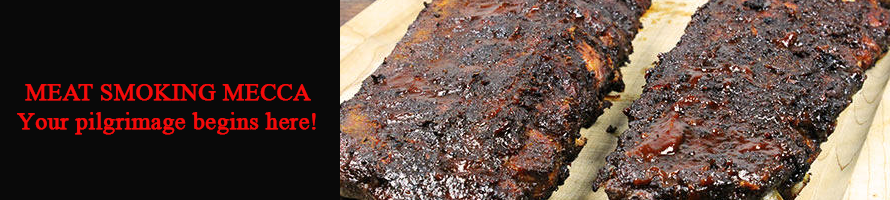
<style>
.page{position:relative;width:890px;height:200px;background:#090909}
.page>*{position:absolute;margin:0}
.t1{font:24px "MongolianBaiti";color:#f50a0a;font-weight:bold}
</style>
<div class="page">
<p class="t1" style="left:17px;top:84px;width:299px;height:51px;text-align:center">MEAT SMOKING MECCA<br>Your pilgrimage begins here!</p>
</div>
